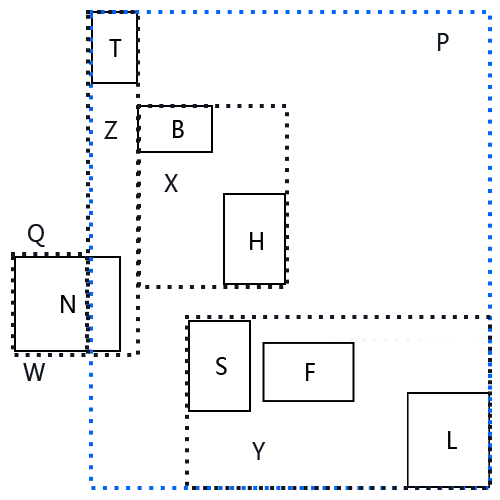
<style>
.page{position:relative;width:500px;height:500px;background:#ffffff}
.page>*{position:absolute;margin:0}
.t1{font:24px "MicrosoftYaHei";letter-spacing:0.02em;color:#000002;scale:0.9 1}
.t2{font:24px "MicrosoftYaHei";letter-spacing:0.02em;color:#10161f;scale:0.9 1}
</style>
<div class="page">
<p class="t1" style="left:109px;top:39px;width:13px;height:18px">T</p>
<p class="t2" style="left:438px;top:33px;width:11px;height:18px">P</p>
<p class="t2" style="left:104px;top:121px;width:14px;height:18px">Z</p>
<p class="t1" style="left:173px;top:120px;width:11px;height:18px">B</p>
<p class="t2" style="left:164px;top:174px;width:14px;height:18px">X</p>
<p class="t2" style="left:28px;top:224px;width:17px;height:23px">Q</p>
<p class="t1" style="left:250px;top:232px;width:13px;height:18px">H</p>
<p class="t1" style="left:61px;top:295px;width:14px;height:18px">N</p>
<p class="t2" style="left:23px;top:363px;width:22px;height:18px">W</p>
<p class="t1" style="left:216px;top:357px;width:11px;height:18px">S</p>
<p class="t1" style="left:306px;top:363px;width:9px;height:18px">F</p>
<p class="t1" style="left:448px;top:431px;width:9px;height:18px">L</p>
<p class="t2" style="left:252px;top:442px;width:14px;height:18px">Y</p>
</div>
